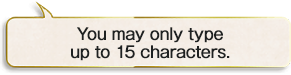
<style>
.page{position:relative;width:291px;height:75px;background:#ffffff}
.page>*{position:absolute;margin:0}
.t1{font:16px/18px "GothicMB101Pro-Regular";letter-spacing:-0.04em;color:#1e2121;font-weight:bold}
</style>
<div class="page">
<p class="t1" style="left:71px;top:27px;width:159px;height:34px;text-align:center">You may only type<br>up to 15 characters.</p>
</div>
